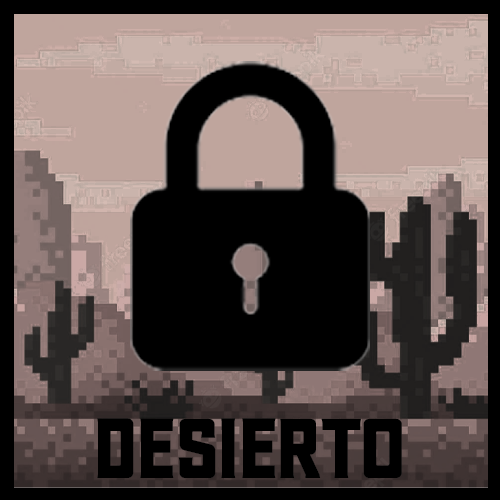
<style>
.page{position:relative;width:500px;height:500px;background:#000000}
.page>*{position:absolute;margin:0}
.t1{font:85px "UniformBoldBold";color:#000000}
</style>
<div class="page">
<p class="t1" style="left:97px;top:418px;width:305px;height:60px">desierto</p>
</div>
